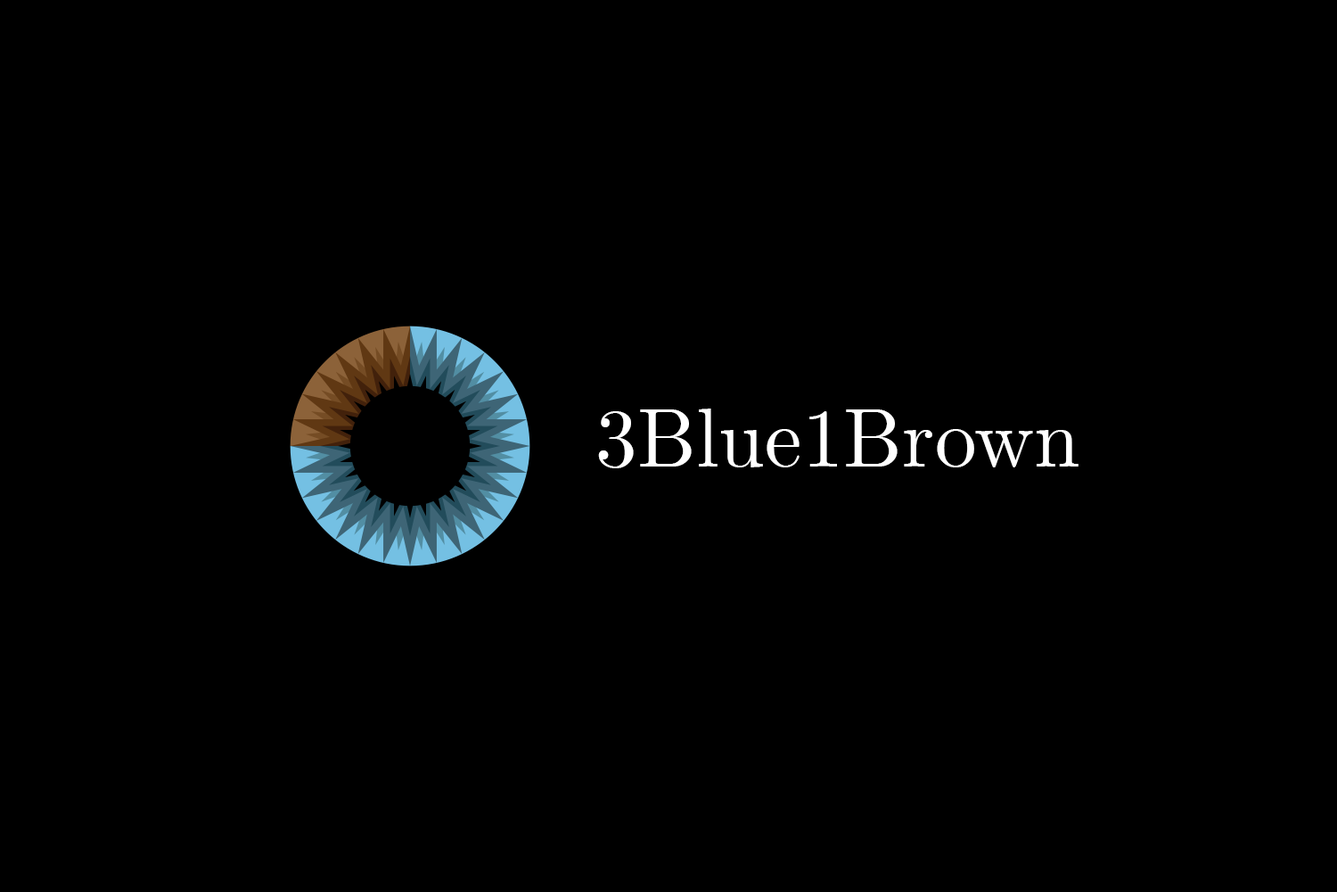
<style>
.page{position:relative;width:1337px;height:892px;background:#000000}
.page>*{position:absolute;margin:0}
.t1{font:83.2px "CMUSerif-Roman";color:#ffffff}
</style>
<div class="page">
<p class="t1" style="left:598px;top:408px;width:481px;height:60px">3Blue1Brown</p>
</div>
